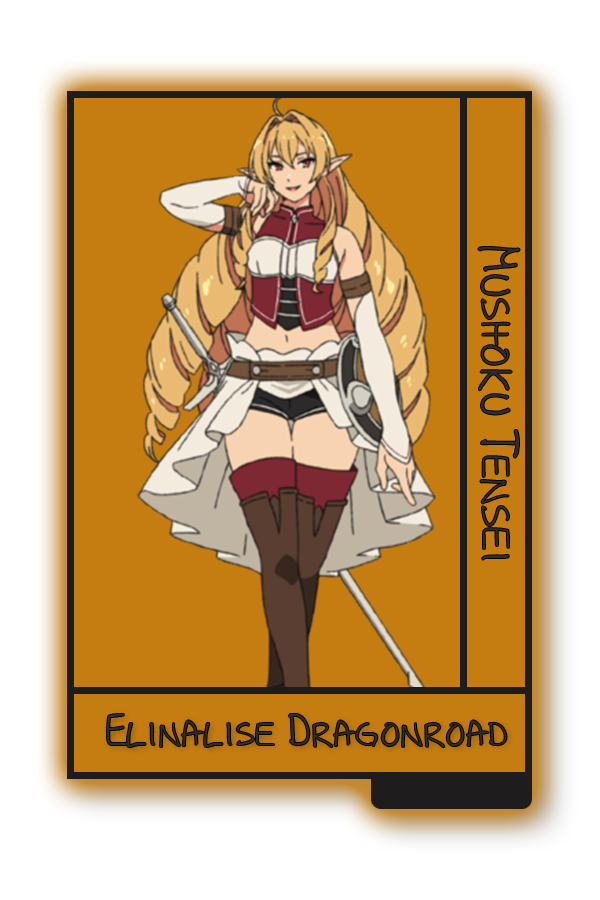
<style>
.page{position:relative;width:600px;height:900px;background:#c57d12}
.page>*{position:absolute;margin:0}
.t1{font:41px "AllCaps";color:#312d2d}
.t2{font:35.4px "AllCaps";color:#312d2d}
</style>
<div class="page">
<p class="t1" style="left:478px;top:247px;width:42px;height:313px;rotate:90deg">Mushoku Tensei</p>
<p class="t2" style="left:107px;top:714px;width:400px;height:33px">Elinalise Dragonroad</p>
</div>
